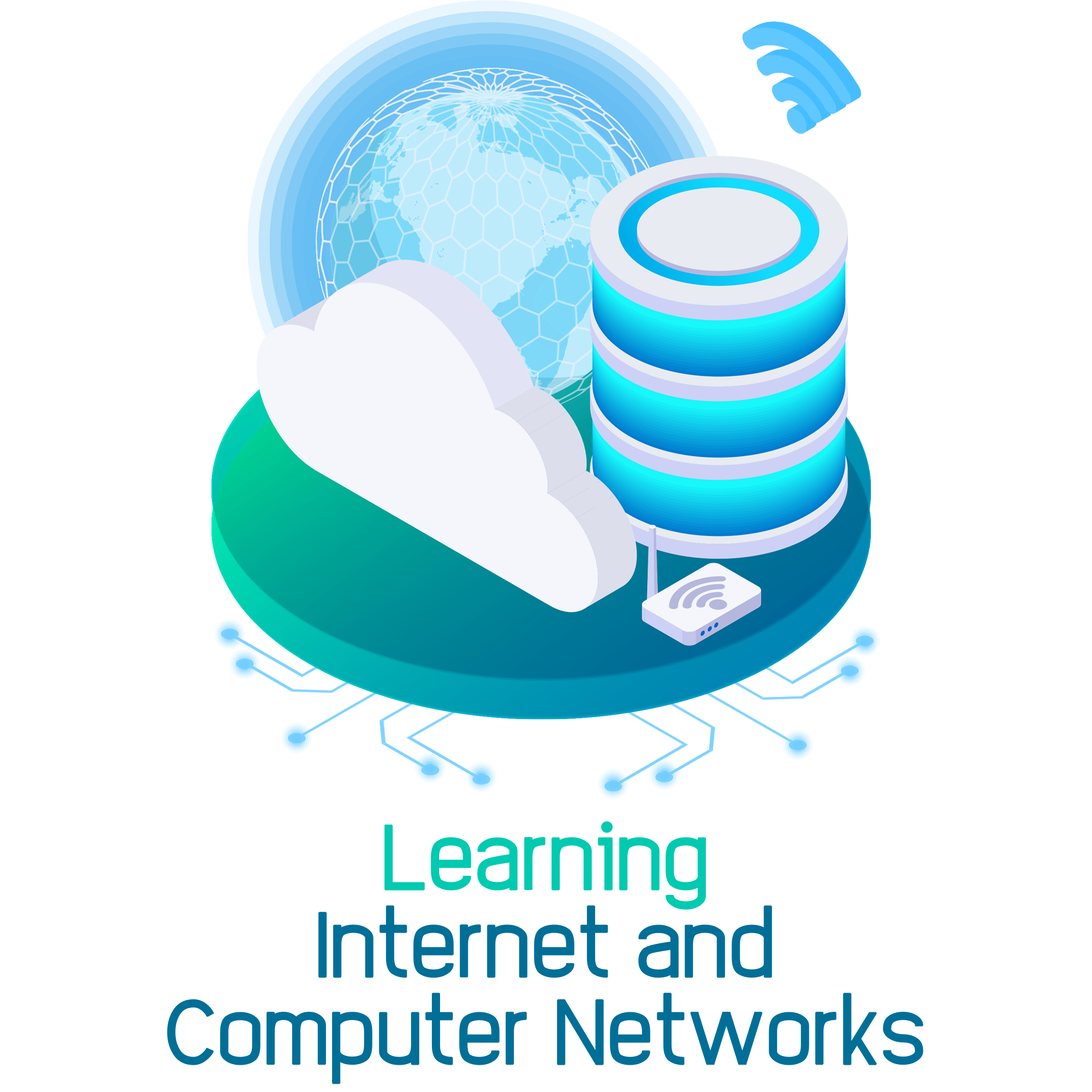
<style>
.page{position:relative;width:1092px;height:1092px;background:#ffffff}
.page>*{position:absolute;margin:0}
.t1{font:65.5px/87.4px "EleganTech";color:#006f97;font-weight:bold}
.t2{font:65.5px/87.4px "EleganTech";color:#00cab0;font-weight:bold}
</style>
<div class="page">
<p class="t1" style="left:167px;top:821px;width:756px;height:263px;text-align:center"><span class="t2">Learning<br></span>Internet and<br>Computer Networks</p>
</div>
